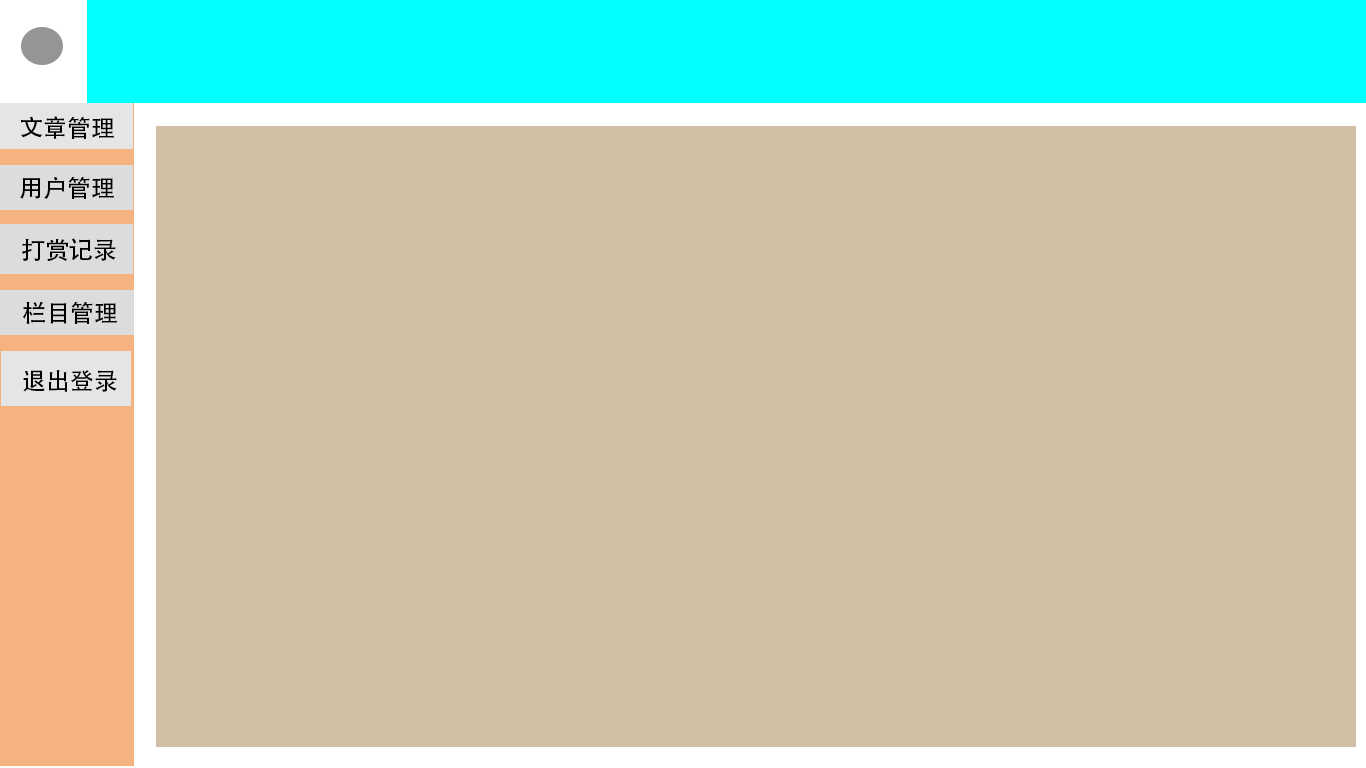
<style>
.page{position:relative;width:1366px;height:768px;background:#d1c0a5}
.page>*{position:absolute;margin:0}
.t1{font:24px "AdobeHeitiStd-Regular";color:#000000}
</style>
<div class="page">
<p class="t1" style="left:21px;top:116px;width:93px;height:23px">文章管理</p>
<p class="t1" style="left:20px;top:176px;width:94px;height:23px">用户管理</p>
<p class="t1" style="left:22px;top:238px;width:94px;height:23px">打赏记录</p>
<p class="t1" style="left:22px;top:301px;width:95px;height:23px">栏目管理</p>
<p class="t1" style="left:23px;top:370px;width:94px;height:22px">退出登录</p>
</div>
